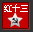
<style>
.page{position:relative;width:33px;height:32px;background:#c50000}
.page>*{position:absolute;margin:0}
.t1{font:10.4px "SimSun";letter-spacing:-0.25em;color:#ffffff}
</style>
<div class="page">
<p class="t1" style="left:4px;top:4px;width:24px;height:8px">红十三</p>
</div>
